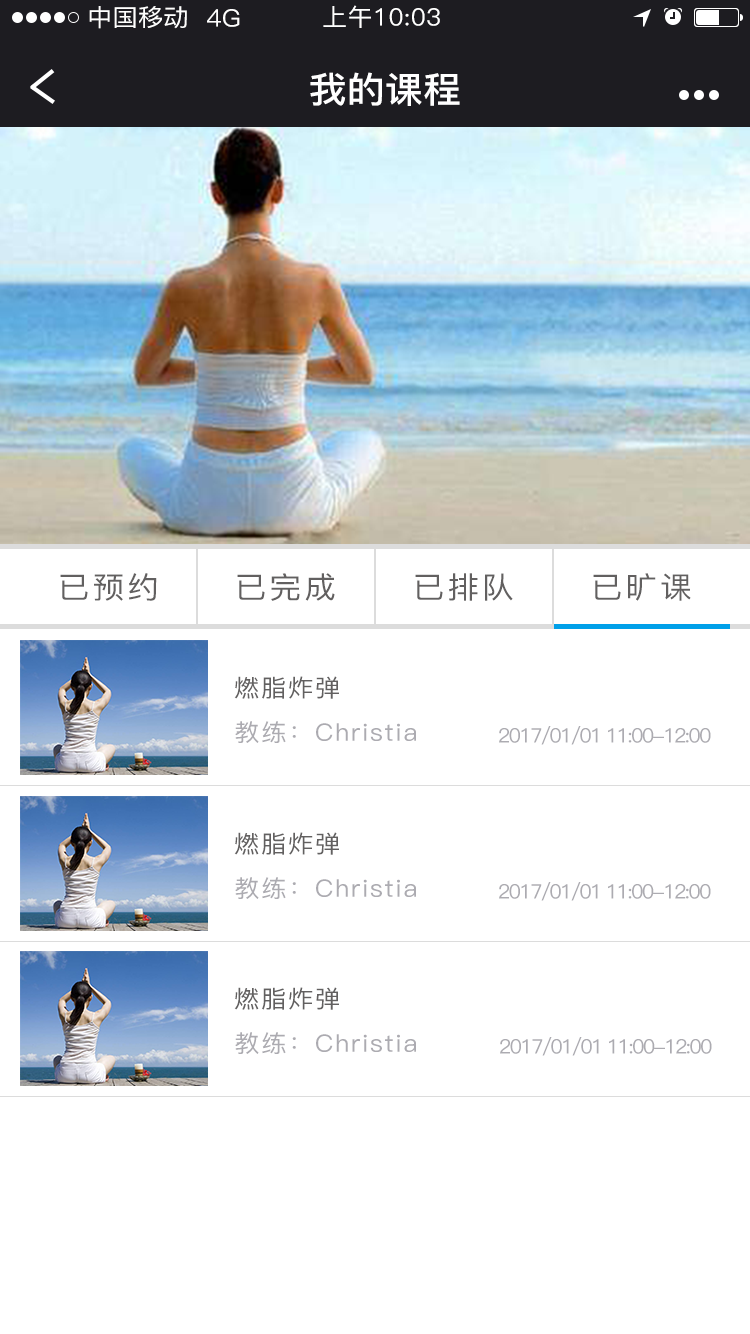
<style>
.page{position:relative;width:750px;height:1334px;background:#ffffff}
.page>*{position:absolute;margin:0}
.t1{font:24px "PingFang-SC-Medium";letter-spacing:0.01em;color:#ffffff;scale:1.05 1}
.t2{font:36px "PingFang-SC-Bold";letter-spacing:0.01em;color:#ffffff;scale:1.05 1}
.t3{font:30px "PingFang-SC-Medium";letter-spacing:0.1em;color:#626060;scale:1.05 1}
.t4{font:24px "PingFang-SC-Medium";letter-spacing:0.07em;color:#626060;scale:1.05 1}
.t5{font:24px "PingFang-SC-Medium";letter-spacing:0.07em;color:#acabb1;scale:1.05 1}
.t6{font:20px "PingFang-SC-Medium";letter-spacing:-0.09em;color:#acabb1;scale:1.05 1}
</style>
<div class="page">
<p class="t1" style="left:89px;top:6px;width:98px;height:23px">中国移动</p>
<p class="t1" style="left:323px;top:5px;width:117px;height:23px">上午10:03</p>
<p class="t1" style="left:207px;top:9px;width:33px;height:18px">4G</p>
<p class="t2" style="left:310px;top:72px;width:150px;height:34px">我的课程</p>
<p class="t3" style="left:60px;top:573px;width:97px;height:28px">已预约</p>
<p class="t3" style="left:237px;top:573px;width:98px;height:28px">已完成</p>
<p class="t3" style="left:415px;top:573px;width:98px;height:28px">已排队</p>
<p class="t3" style="left:593px;top:573px;width:98px;height:28px">已旷课</p>
<p class="t4" style="left:234px;top:676px;width:105px;height:23px">燃脂炸弹</p>
<p class="t5" style="left:235px;top:721px;width:181px;height:22px">教练：Christia</p>
<p class="t6" style="left:499px;top:726px;width:212px;height:19px">2017/01/01 11:00-12:00</p>
<p class="t4" style="left:234px;top:832px;width:105px;height:23px">燃脂炸弹</p>
<p class="t5" style="left:235px;top:877px;width:181px;height:22px">教练：Christia</p>
<p class="t6" style="left:499px;top:882px;width:212px;height:19px">2017/01/01 11:00-12:00</p>
<p class="t4" style="left:234px;top:987px;width:105px;height:23px">燃脂炸弹</p>
<p class="t5" style="left:235px;top:1032px;width:181px;height:22px">教练：Christia</p>
<p class="t6" style="left:500px;top:1037px;width:212px;height:19px">2017/01/01 11:00-12:00</p>
</div>
